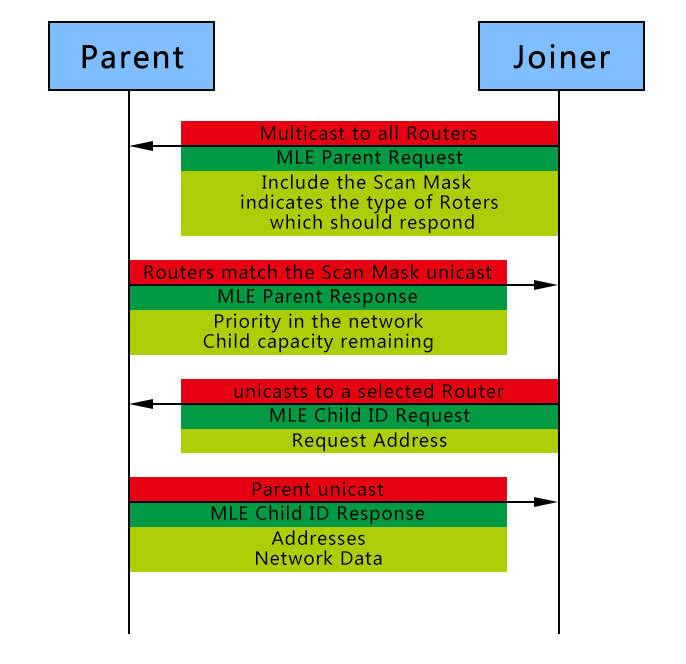
<style>
.page{position:relative;width:686px;height:664px;background:#ffffff}
.page>*{position:absolute;margin:0}
.t1{font:30px "MicrosoftYaHei";letter-spacing:0.045em;color:#000000;font-weight:bold}
.t2{font:18px "MicrosoftYaHei";letter-spacing:0.045em;color:#000000}
.t3{font:18px/20px "MicrosoftYaHei";letter-spacing:0.045em;color:#000000}
</style>
<div class="page">
<p class="t1" style="left:82px;top:45px;width:102px;height:24px">Parent</p>
<p class="t1" style="left:513px;top:44px;width:97px;height:25px">Joiner</p>
<p class="t2" style="left:261px;top:125px;width:216px;height:15px">Multicast to all Routers</p>
<p class="t2" style="left:277px;top:150px;width:186px;height:19px">MLE Parent Request</p>
<p class="t3" style="left:241px;top:174px;width:257px;height:60px;text-align:center">Include the Scan Mask <br>indicates the type of Roters<br> which should respond</p>
<p class="t2" style="left:144px;top:264px;width:348px;height:15px">Routers match the Scan Mask unicast</p>
<p class="t2" style="left:218px;top:289px;width:199px;height:19px">MLE Parent Response</p>
<p class="t3" style="left:203px;top:313px;width:230px;height:40px;text-align:center">Priority in the network<br>Child capacity remaining</p>
<p class="t2" style="left:234px;top:383px;width:270px;height:15px">unicasts to a selected Router</p>
<p class="t2" style="left:270px;top:407px;width:200px;height:20px">MLE Child ID Request</p>
<p class="t2" style="left:293px;top:432px;width:154px;height:20px">Request Address</p>
<p class="t2" style="left:252px;top:481px;width:132px;height:15px">Parent unicast</p>
<p class="t2" style="left:211px;top:505px;width:214px;height:20px">MLE Child ID Response</p>
<p class="t3" style="left:256px;top:530px;width:126px;height:35px;text-align:center">Addresses<br>Network Data</p>
</div>
